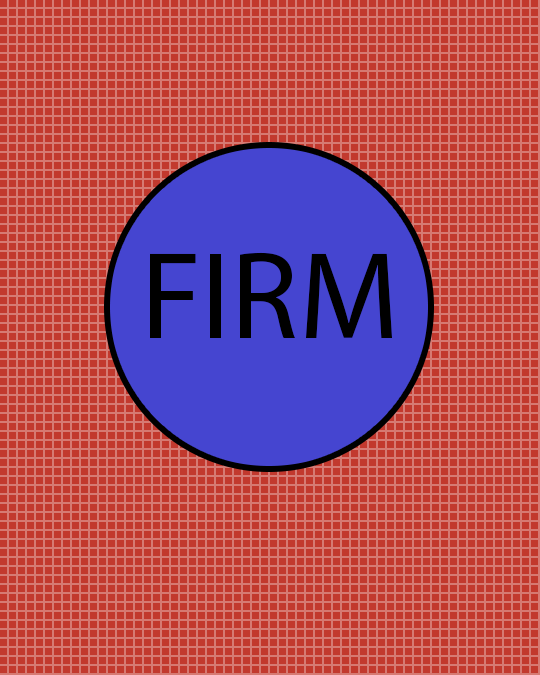
<style>
.page{position:relative;width:540px;height:675px;background:#c2392e}
.page>*{position:absolute;margin:0}
.t1{font:125px "MyriadPro-Regular";color:#000000}
</style>
<div class="page">
<p class="t1" style="left:150px;top:252px;width:242px;height:86px">FIRM</p>
</div>
